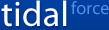
<style>
.page{position:relative;width:109px;height:30px}
.page>*{position:absolute;margin:0}
.t1{font:36px "MyriadPro-Regular";letter-spacing:0.01em;color:#ffffff}
.t2{font:18px "MyriadPro-Regular";letter-spacing:0.01em;color:#5391ed}
</style>
<div class="page">
<p class="t1" style="left:1px;top:0px;width:66px;height:27px">tidal</p>
<p class="t2" style="left:71px;top:1px;width:38px;height:14px">force</p>
</div>
